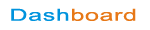
<style>
.page{position:relative;width:150px;height:30px;background:#ffffff}
.page>*{position:absolute;margin:0}
.t1{font:16.5px "ArialMT";letter-spacing:0.025em;color:#e77817;scale:1.52 1}
.t2{font:16.5px "ArialMT";letter-spacing:0.025em;color:#0093dd;scale:1.52 1}
</style>
<div class="page">
<p class="t1" style="left:11px;top:8px;width:125px;height:13px"><span class="t2">Dash</span>board</p>
</div>
